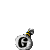
<style>
.page{position:relative;width:50px;height:50px;background:#ffffff}
.page>*{position:absolute;margin:0}
.t1{font:12px "Ravie";color:#030300}
</style>
<div class="page">
<p class="t1" style="left:18px;top:37px;width:10px;height:11px">G</p>
</div>
